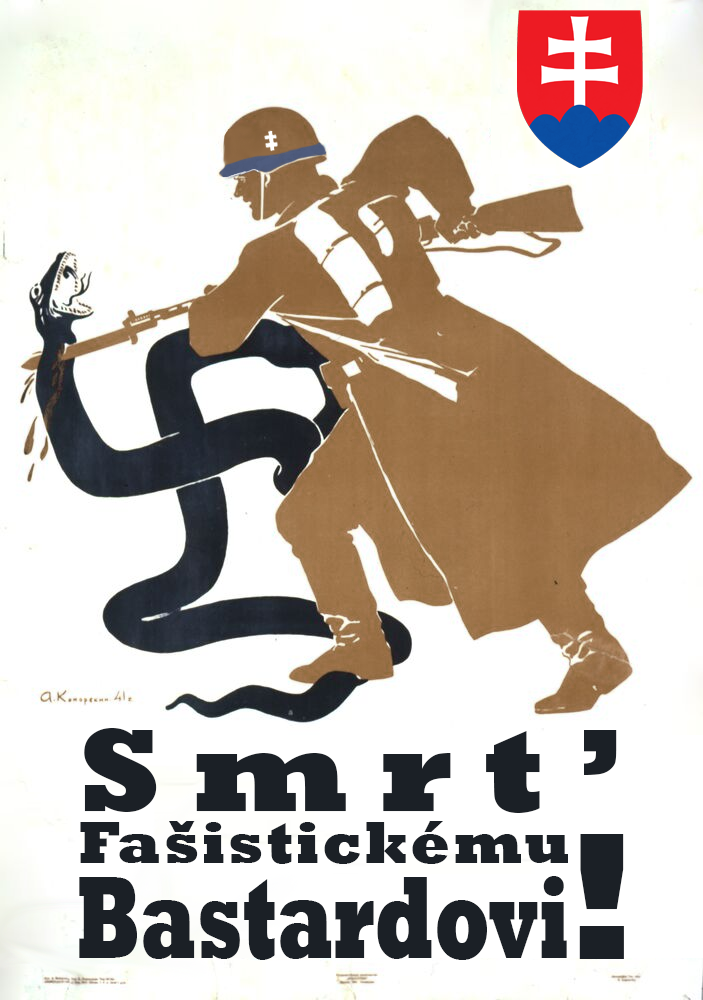
<style>
.page{position:relative;width:703px;height:1000px;background:#ffffff}
.page>*{position:absolute;margin:0}
.t1{font:120px "Rockwell-ExtraBold";letter-spacing:0.22em;color:#1b2026;scale:1.1 1}
.t2{font:60px "Rockwell-ExtraBold";letter-spacing:0.05em;color:#1b2026;scale:0.96 1}
.t3{font:183.8px "Rockwell-ExtraBold";letter-spacing:0.22em;color:#1b2026}
.t4{font:118.7px "Rockwell-ExtraBold";color:#1b2026;scale:0.63 1}
</style>
<div class="page">
<p class="t1" style="left:84px;top:728px;width:533px;height:85px">Smrt’</p>
<p class="t2" style="left:80px;top:821px;width:488px;height:43px">Fašistickému</p>
<p class="t3" style="left:579px;top:834px;width:45px;height:125px">!</p>
<p class="t4" style="left:79px;top:876px;width:488px;height:84px">Bastardovi</p>
</div>
